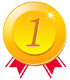
<style>
.page{position:relative;width:70px;height:80px;background:#ffffff}
.page>*{position:absolute;margin:0}
.t1{font:41.4px "BookmanOldStyle";font-style:italic}
.t2{font:41.4px "BookmanOldStyle";color:#d37a02;font-style:italic}
</style>
<div class="page">
<p class="t1" style="left:26px;top:18px;width:15px;height:29px">1</p>
<p class="t2" style="left:26px;top:18px;width:14px;height:29px">1</p>
</div>
